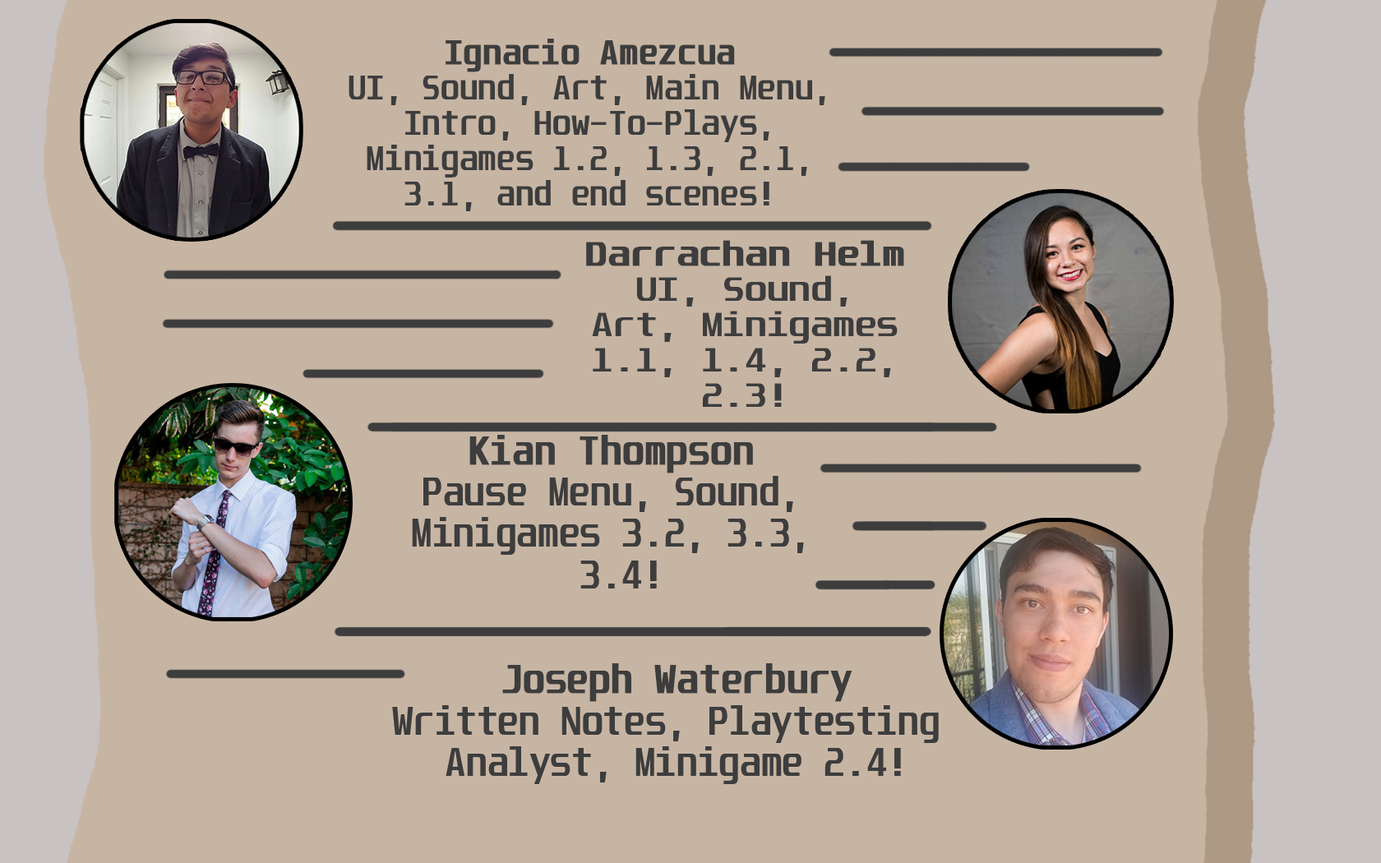
<style>
.page{position:relative;width:1381px;height:863px;background:#c7b5a4}
.page>*{position:absolute;margin:0}
.t1{font:29.5px "Unispace-Bold";color:#3d3d3d;scale:1.04 1}
.t2{font:29.5px "Unispace-Bold";color:#3d3d3d;font-weight:bold;scale:1.04 1}
.t3{font:29.5px "Unispace-Bold";color:#3d3d3d;scale:1.22 1}
.t4{font:29.5px "Unispace-Bold";color:#3d3d3d;font-weight:bold;scale:1.22 1}
.t5{font:34.5px "Unispace-Bold";color:#3d3d3d}
.t6{font:34.5px "Unispace-Bold";color:#3d3d3d;font-weight:bold}
</style>
<div class="page">
<p class="t1" style="left:349px;top:39px;width:476px;height:172px;text-align:center"><span class="t2">Ignacio Amezcua<br></span>UI, Sound, Art, Main Menu,<br>Intro, How-To-Plays,<br>Minigames 1.2, 1.3, 2.1,<br>3.1, and end scenes!</p>
<p class="t3" style="left:586px;top:240px;width:318px;height:167px;text-align:center"><span class="t4">Darrachan Helm<br></span>UI, Sound,<br>Art, Minigames<br>1.1, 1.4, 2.2,<br>2.3!</p>
<p class="t5" style="left:412px;top:435px;width:392px;height:154px;text-align:center"><span class="t6">Kian Thompson<br></span>Pause Menu, Sound,<br>Minigames 3.2, 3.3,<br> 3.4!</p>
<p class="t5" style="left:392px;top:664px;width:547px;height:120px;text-align:center"><span class="t6">Joseph Waterbury<br></span>Written Notes, Playtesting <br>Analyst, Minigame 2.4!</p>
</div>
